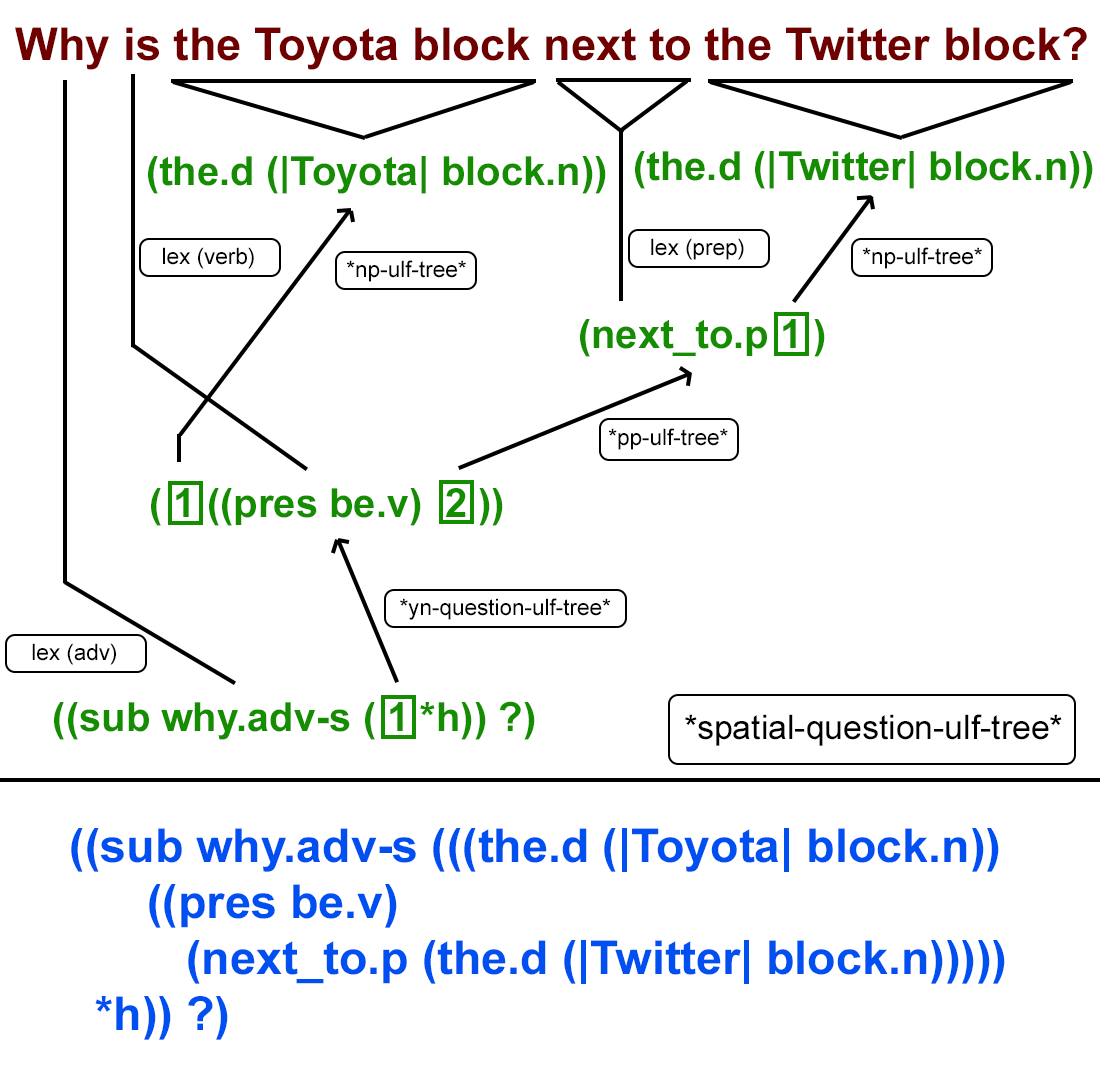
<style>
.page{position:relative;width:1100px;height:1069px;background:#ffffff}
.page>*{position:absolute;margin:0}
.t1{font:45.3px "Arial-BoldMT";color:#700000}
.t2{font:40px "Arial-BoldMT";color:#148e00}
.t3{font:22.5px "ArialMT";color:#000000}
.t4{font:33.8px "ArialMT";color:#000000}
.t5{font:46.7px "Arial-BoldMT";color:#004ff1}
</style>
<div class="page">
<p class="t1" style="left:15px;top:27px;width:1072px;height:43px">Why is the Toyota block next to the Twitter block?</p>
<p class="t2" style="left:148px;top:156px;width:458px;height:38px">(the.d (|Toyota| block.n))</p>
<p class="t2" style="left:635px;top:151px;width:458px;height:38px">(the.d (|Twitter| block.n))</p>
<p class="t3" style="left:651px;top:238px;width:93px;height:22px">lex (prep)</p>
<p class="t3" style="left:163px;top:247px;width:91px;height:22px">lex (verb)</p>
<p class="t3" style="left:862px;top:247px;width:120px;height:22px">*np-ulf-tree*</p>
<p class="t3" style="left:346px;top:260px;width:120px;height:22px">*np-ulf-tree*</p>
<p class="t2" style="left:580px;top:319px;width:245px;height:38px">(next_to.p 1 )</p>
<p class="t3" style="left:608px;top:428px;width:120px;height:22px">*pp-ulf-tree*</p>
<p class="t2" style="left:151px;top:488px;width:352px;height:38px">( 1 ((pres be.v)  2 ))</p>
<p class="t3" style="left:400px;top:598px;width:211px;height:22px">*yn-question-ulf-tree*</p>
<p class="t3" style="left:32px;top:643px;width:84px;height:22px">lex (adv)</p>
<p class="t2" style="left:54px;top:701px;width:481px;height:39px">((sub why.adv-s ( 1 *h)) ?)</p>
<p class="t4" style="left:685px;top:714px;width:377px;height:32px">*spatial-question-ulf-tree*</p>
<p class="t5" style="left:71px;top:828px;width:934px;height:212px">((sub why.adv-s (((the.d (|Toyota| block.n))<br>      ((pres be.v)<br>         (next_to.p (the.d (|Twitter| block.n)))))<br>  *h)) ?)</p>
</div>
